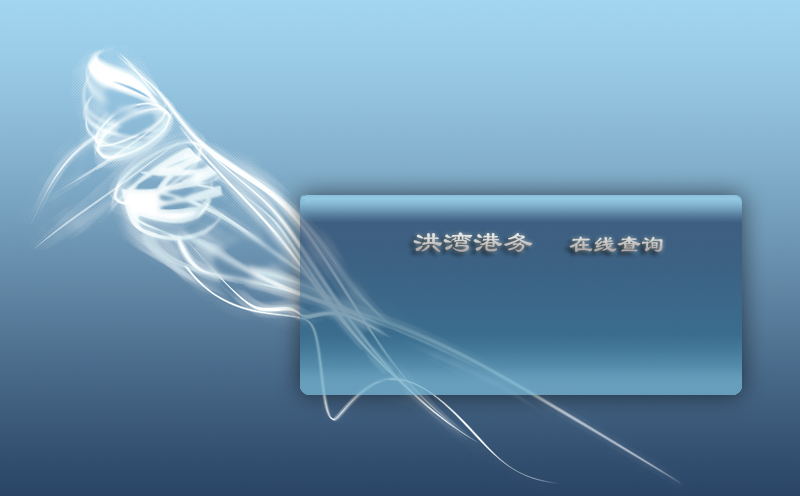
<style>
.page{position:relative;width:800px;height:496px}
.page>*{position:absolute;margin:0}
.t1{font:30px "LiSu"}
.t2{font:24px "LiSu"}
</style>
<div class="page">
<p class="t1" style="left:413px;top:232px;width:250px;height:20px">洪湾港务<span class="t2">   在线查询</span></p>
</div>
